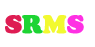
<style>
.page{position:relative;width:95px;height:47px;background:#ffffff}
.page>*{position:absolute;margin:0}
.t1{font:25px "CooperBlackStd";color:#de1d53;font-weight:bold}
.t2{font:25px "CooperBlackStd";color:#1dd433;font-weight:bold}
.t3{font:25px "CooperBlackStd";color:#f2f930;font-weight:bold}
.t4{font:25px "CooperBlackStd";color:#fe30e3;font-weight:bold}
</style>
<div class="page">
<p class="t1" style="left:5px;top:15px;width:79px;height:19px">S<span class="t2">R</span><span class="t3">M</span><span class="t4">S</span></p>
</div>
